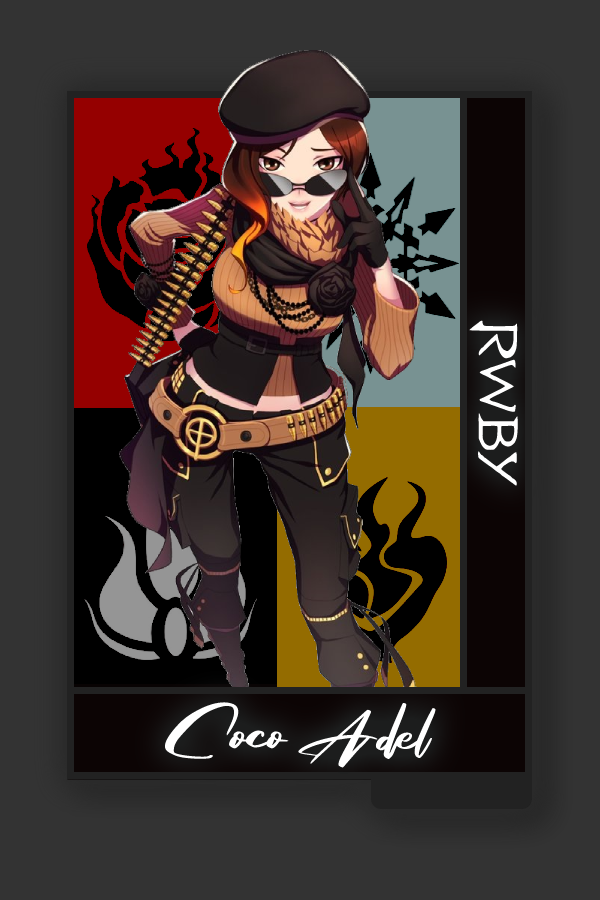
<style>
.page{position:relative;width:600px;height:900px;background:#333333}
.page>*{position:absolute;margin:0}
.t1{font:61.3px "RWBY_Style";color:#ffffff;scale:1.25 1}
.t2{font:75px "RosegaFREE";color:#ffffff}
</style>
<div class="page">
<p class="t1" style="left:469px;top:320px;width:49px;height:166px;rotate:90deg">RWBY</p>
<p class="t2" style="left:164px;top:702px;width:272px;height:66px">Coco Adel</p>
</div>
